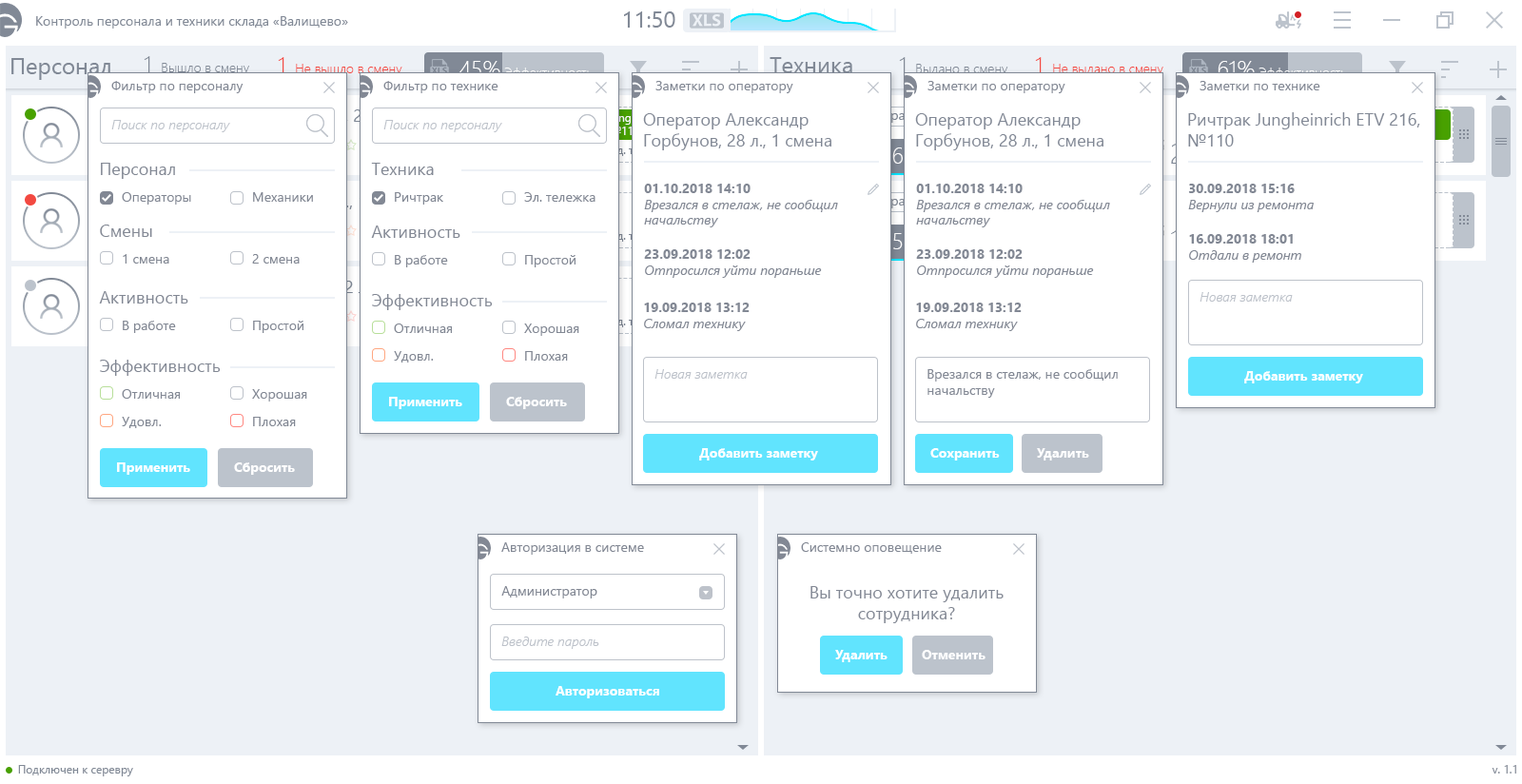
<style>
.page{position:relative;width:1522px;height:784px;background:#ffffff}
.page>*{position:absolute;margin:0}
.t1{font:13.3px "SegoeUI";color:#828894}
.t2{font:17.1px "SegoeUI";color:#818895}
.t3{font:13.3px "SegoeUI-SemilightItalic";color:#bdc2ca}
.t4{font:17.1px "SegoeUI";color:#828894}
.t5{font:13.3px "SegoeUI-Italic";color:#828894}
.t6{font:13.3px "SegoeUI-Bold";color:#828894}
.t7{font:13.3px "SegoeUI-Bold";color:#ffffff}
</style>
<div class="page">
<p class="t1" style="left:111px;top:81px;width:132px;height:12px">Фильтр по персоналу</p>
<p class="t1" style="left:383px;top:81px;width:115px;height:12px">Фильтр по технике</p>
<p class="t1" style="left:655px;top:81px;width:138px;height:12px">Заметки по оператору</p>
<p class="t1" style="left:927px;top:81px;width:138px;height:12px">Заметки по оператору</p>
<p class="t1" style="left:1199px;top:81px;width:121px;height:9px">Заметки по технике</p>
<p class="t2" style="left:643px;top:113px;width:188px;height:37px;text-align:justify">Оператор Александр <br>Горбунов, 28 л., 1 смена</p>
<p class="t2" style="left:915px;top:113px;width:188px;height:37px;text-align:justify">Оператор Александр <br>Горбунов, 28 л., 1 смена</p>
<p class="t2" style="left:1188px;top:112px;width:232px;height:34px;text-align:justify">Ричтрак Jungheinrich ETV 216, <br>№110</p>
<p class="t3" style="left:111px;top:120px;width:119px;height:12px">Поиск по персоналу</p>
<p class="t3" style="left:383px;top:120px;width:119px;height:12px">Поиск по персоналу</p>
<p class="t4" style="left:101px;top:163px;width:74px;height:16px">Персонал</p>
<p class="t4" style="left:371px;top:163px;width:63px;height:12px">Техника</p>
<p class="t5" style="left:644px;top:184px;width:194px;height:43px;text-align:justify"><span class="t6">01.10.2018 14:10<br></span>Врезался в стелаж, не сообщил <br>начальству</p>
<p class="t5" style="left:916px;top:184px;width:194px;height:43px;text-align:justify"><span class="t6">01.10.2018 14:10<br></span>Врезался в стелаж, не сообщил <br>начальству</p>
<p class="t5" style="left:1188px;top:184px;width:125px;height:28px;text-align:justify"><span class="t6">30.09.2018 15:16<br></span>Вернули из ремонта</p>
<p class="t1" style="left:122px;top:192px;width:69px;height:12px">Операторы</p>
<p class="t1" style="left:253px;top:192px;width:60px;height:10px">Механики</p>
<p class="t1" style="left:395px;top:192px;width:48px;height:12px">Ричтрак</p>
<p class="t1" style="left:524px;top:192px;width:71px;height:10px">Эл. тележка</p>
<p class="t4" style="left:100px;top:224px;width:52px;height:13px">Смены</p>
<p class="t4" style="left:371px;top:225px;width:89px;height:13px">Активность</p>
<p class="t6" style="left:1189px;top:234px;width:112px;height:28px;text-align:justify">16.09.2018 18:01<br><span class="t5">Отдали в ремонт</span></p>
<p class="t1" style="left:123px;top:254px;width:46px;height:9px">1 смена</p>
<p class="t1" style="left:252px;top:254px;width:48px;height:9px">2 смена</p>
<p class="t1" style="left:395px;top:255px;width:53px;height:12px">В работе</p>
<p class="t1" style="left:525px;top:255px;width:50px;height:12px">Простой</p>
<p class="t5" style="left:644px;top:249px;width:178px;height:29px;text-align:justify"><span class="t6">23.09.2018 12:02<br></span>Отпросился уйти пораньше</p>
<p class="t5" style="left:916px;top:249px;width:178px;height:29px;text-align:justify"><span class="t6">23.09.2018 12:02<br></span>Отпросился уйти пораньше</p>
<p class="t4" style="left:99px;top:291px;width:89px;height:12px">Активность</p>
<p class="t4" style="left:372px;top:294px;width:121px;height:16px">Эффективность</p>
<p class="t3" style="left:1199px;top:292px;width:93px;height:9px">Новая заметка</p>
<p class="t6" style="left:644px;top:302px;width:105px;height:29px;text-align:justify">19.09.2018 13:12<br><span class="t5">Сломал технику</span></p>
<p class="t6" style="left:916px;top:302px;width:105px;height:29px;text-align:justify">19.09.2018 13:12<br><span class="t5">Сломал технику</span></p>
<p class="t1" style="left:123px;top:320px;width:53px;height:13px">В работе</p>
<p class="t1" style="left:253px;top:320px;width:50px;height:13px">Простой</p>
<p class="t1" style="left:394px;top:323px;width:58px;height:10px">Отличная</p>
<p class="t1" style="left:524px;top:323px;width:55px;height:13px">Хорошая</p>
<p class="t1" style="left:394px;top:351px;width:40px;height:11px">Удовл.</p>
<p class="t1" style="left:525px;top:351px;width:43px;height:9px">Плохая</p>
<p class="t4" style="left:100px;top:359px;width:121px;height:17px">Эффективность</p>
<p class="t3" style="left:654px;top:369px;width:94px;height:10px">Новая заметка</p>
<p class="t1" style="left:927px;top:369px;width:190px;height:29px;text-align:justify">Врезался в стелаж, не сообщил <br>начальству</p>
<p class="t7" style="left:1244px;top:371px;width:119px;height:12px">Добавить заметку</p>
<p class="t1" style="left:122px;top:389px;width:58px;height:9px">Отличная</p>
<p class="t1" style="left:252px;top:389px;width:55px;height:12px">Хорошая</p>
<p class="t7" style="left:389px;top:397px;width:73px;height:12px">Применить</p>
<p class="t7" style="left:506px;top:397px;width:61px;height:12px">Сбросить</p>
<p class="t1" style="left:122px;top:417px;width:40px;height:11px">Удовл.</p>
<p class="t1" style="left:253px;top:417px;width:43px;height:9px">Плохая</p>
<p class="t7" style="left:699px;top:448px;width:119px;height:12px">Добавить заметку</p>
<p class="t7" style="left:930px;top:448px;width:70px;height:12px">Сохранить</p>
<p class="t7" style="left:1037px;top:448px;width:52px;height:12px">Удалить</p>
<p class="t7" style="left:117px;top:462px;width:73px;height:13px">Применить</p>
<p class="t7" style="left:234px;top:462px;width:61px;height:13px">Сбросить</p>
<p class="t1" style="left:501px;top:542px;width:143px;height:12px">Авторизация в системе</p>
<p class="t1" style="left:801px;top:542px;width:141px;height:11px">Системно оповещение</p>
<p class="t1" style="left:501px;top:586px;width:96px;height:12px">Администратор</p>
<p class="t4" style="left:810px;top:586px;width:193px;height:37px;text-align:center">Вы точно хотите удалить<br>сотрудника?</p>
<p class="t3" style="left:501px;top:636px;width:98px;height:13px">Введите пароль</p>
<p class="t7" style="left:835px;top:650px;width:52px;height:12px">Удалить</p>
<p class="t7" style="left:922px;top:650px;width:63px;height:9px">Отменить</p>
<p class="t7" style="left:555px;top:686px;width:104px;height:12px">Авторизоваться</p>
</div>
